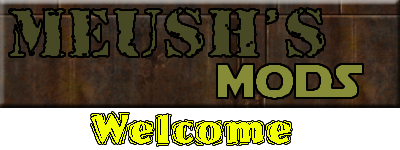
<style>
.page{position:relative;width:400px;height:150px}
.page>*{position:absolute;margin:0}
.t1{font:72px "RubberStampLetPlain"}
.t2{font:48px "StarJedi";color:#868b38}
.t3{font:48px "WestwoodLetPlain";color:#f1ff00}
</style>
<div class="page">
<p class="t1" style="left:9px;top:8px;width:316px;height:49px">MEUSH’s</p>
<p class="t2" style="left:217px;top:64px;width:146px;height:35px">modS</p>
<p class="t3" style="left:91px;top:112px;width:201px;height:34px">Welcome</p>
</div>
